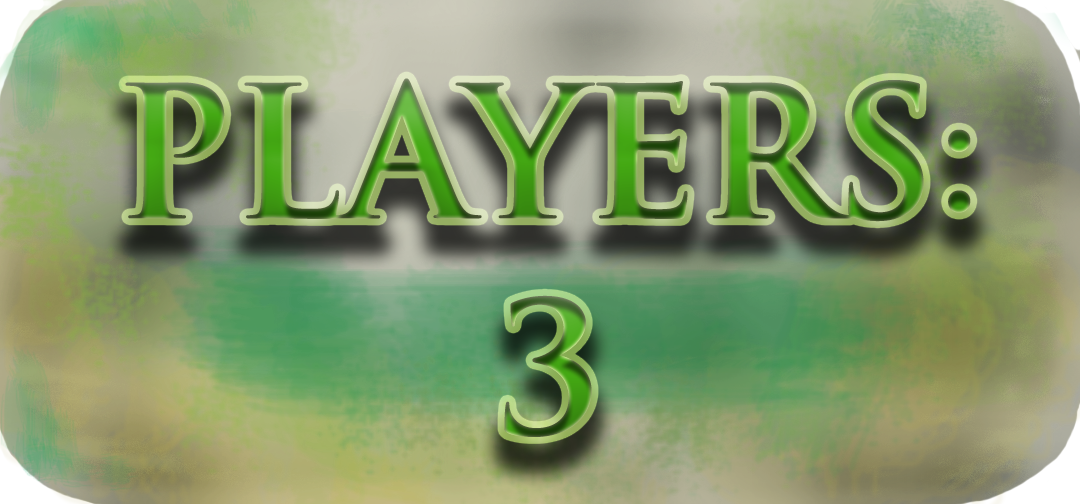
<style>
.page{position:relative;width:1080px;height:504px}
.page>*{position:absolute;margin:0}
.t1{font:180px "TrajanPro-Bold"}
</style>
<div class="page">
<p class="t1" style="left:125px;top:78px;width:846px;height:359px;text-align:center">PLAYERS:<br>3</p>
</div>
